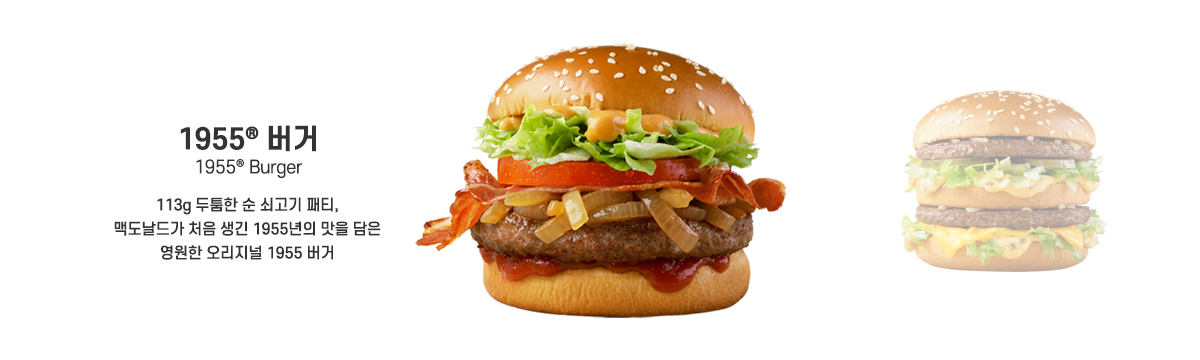
<style>
.page{position:relative;width:1200px;height:360px;background:#ffffff}
.page>*{position:absolute;margin:0}
.t1{font:17.5px/24px "S-CoreDream-4Regular";letter-spacing:-0.02em;color:#333333}
.t2{font:28px/24px "S-CoreDream-6Bold";letter-spacing:-0.02em;color:#333333}
.t3{font:15px/24px "S-CoreDream-5Medium";letter-spacing:-0.02em;color:#333333}
</style>
<div class="page">
<p class="t1" style="left:180px;top:125px;width:136px;height:53px;text-align:center"><span class="t2">1955® 버거<br></span>1955® Burger</p>
<p class="t3" style="left:114px;top:197px;width:267px;height:63px;text-align:center">113g 두툼한 순 쇠고기 패티,<br>맥도날드가 처음 생긴 1955년의 맛을 담은<br>영원한 오리지널 1955 버거</p>
</div>
